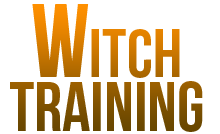
<style>
.page{position:relative;width:220px;height:134px;background:#ffffff}
.page>*{position:absolute;margin:0}
.t1{font:70px/54.1px "BebasNeue"}
.t2{font:68px/47.1px "BebasNeue"}
.t3{font:104px/47.1px "BebasNeue"}
</style>
<div class="page">
<p class="t1" style="left:10px;top:4px;width:193px;height:128px;text-align:center"><span class="t2"> </span><span class="t3">W</span><span class="t2">itch<br></span> Training</p>
</div>
